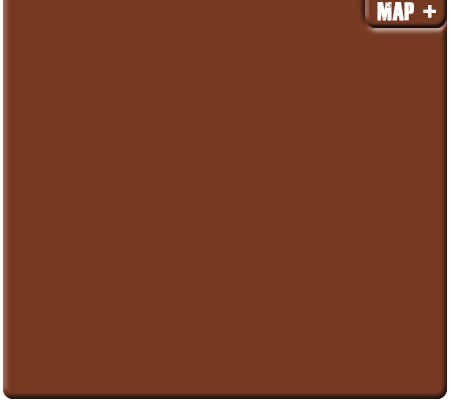
<style>
.page{position:relative;width:450px;height:400px;background:#763a23}
.page>*{position:absolute;margin:0}
.t1{font:18px "DeadKansas";color:#ffffff}
</style>
<div class="page">
<p class="t1" style="left:377px;top:2px;width:59px;height:19px">MAP +</p>
</div>
